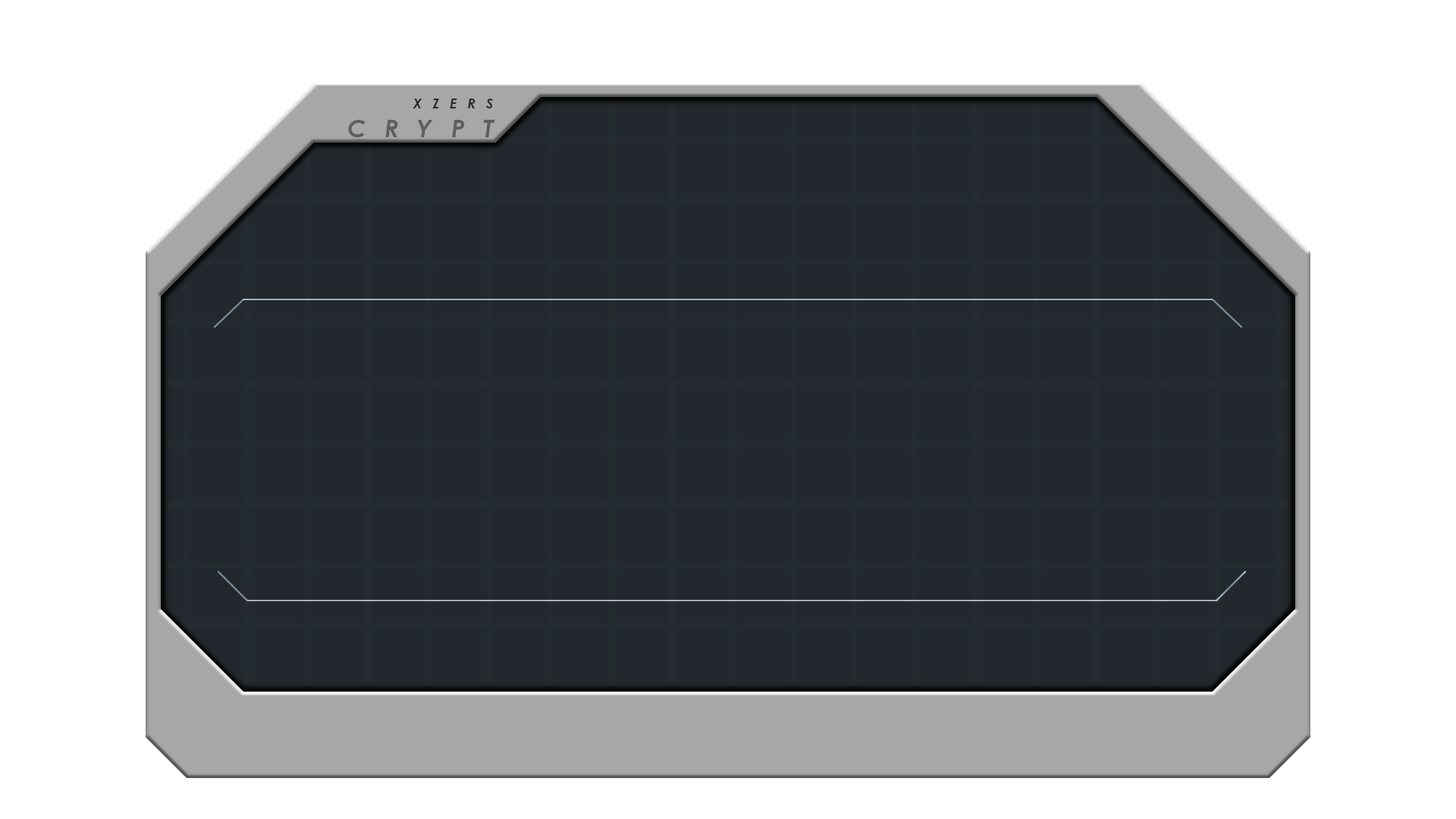
<style>
.page{position:relative;width:1456px;height:819px;background:#22282d}
.page>*{position:absolute;margin:0}
.t1{font:13.8px "CenturyGothic-BoldItalic";letter-spacing:0.76em;color:#2b2b2b}
.t2{font:24.3px "CenturyGothic-BoldItalic";letter-spacing:0.76em;color:#5e5e5e}
</style>
<div class="page">
<p class="t1" style="left:348px;top:99px;width:147px;height:38px;text-align:right">XZERS<br><span class="t2">CRYPT</span></p>
</div>
